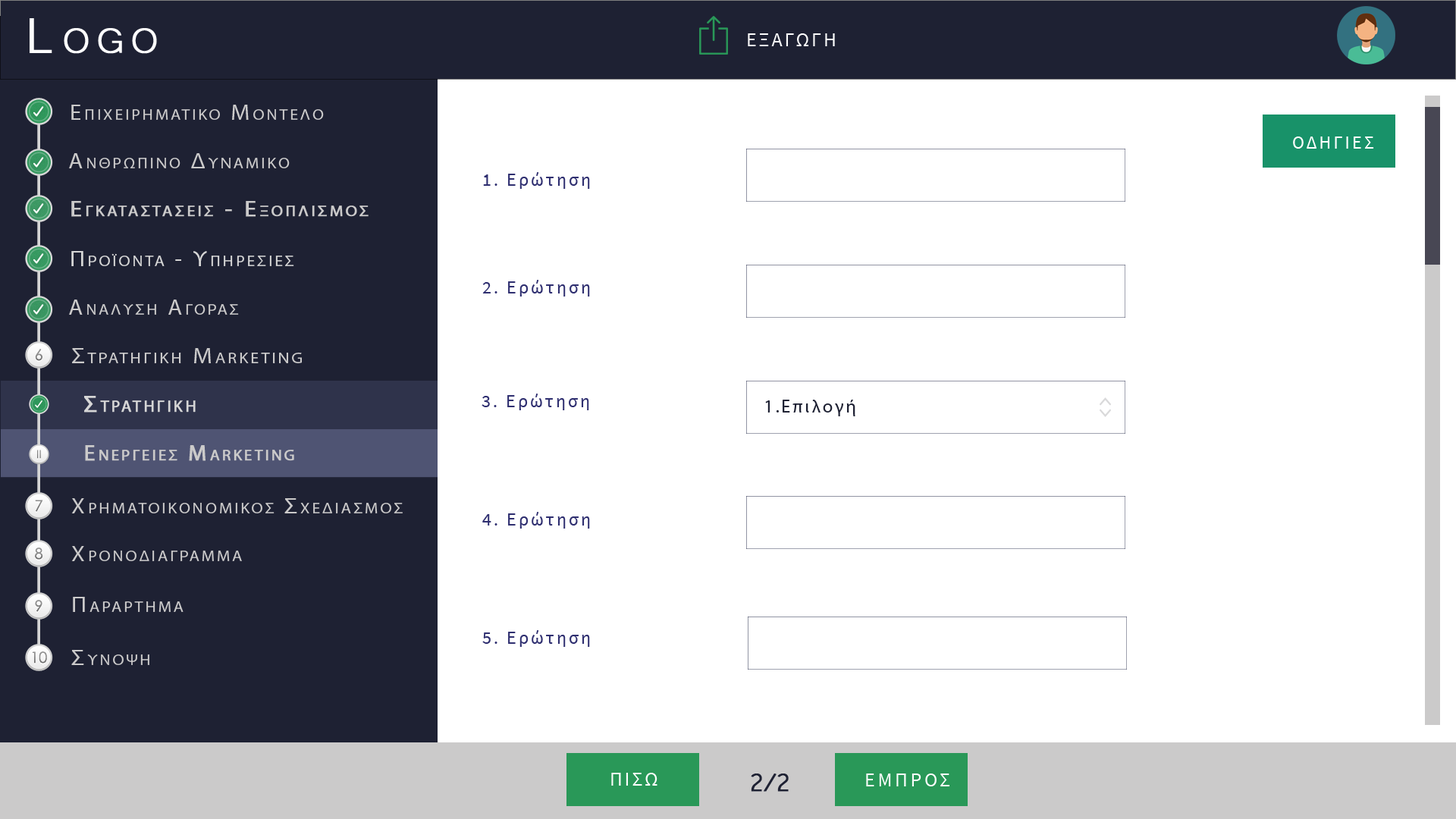
<style>
.page{position:relative;width:1456px;height:819px;background:#ffffff}
.page>*{position:absolute;margin:0}
.t1{font:63.7px "Microsoft-Yi-Baiti";letter-spacing:0.13em;color:#ffffff;font-variant:small-caps;font-weight:bold}
.t2{font:20px "SourceSansPro-Regular";letter-spacing:0.1em;color:#fefefe;text-transform:uppercase}
.t3{font:21.7px "MyriadPro-Regular";letter-spacing:0.13em;color:#cbcaca;font-variant:small-caps;scale:1.09 1}
.t4{font:23.4px "Microsoft-Yi-Baiti";letter-spacing:0.13em;color:#cbcaca;font-variant:small-caps;font-weight:bold}
.t5{font:18.2px "SourceSansPro-Regular";letter-spacing:0.13em;color:#ffffff;text-transform:uppercase}
.t6{font:18.2px "SourceSansPro-Regular";letter-spacing:0.13em;color:#2f2f70}
.t7{font:18.2px "SourceSansPro-Regular";letter-spacing:0.13em;color:#2f2f70;text-transform:uppercase}
.t8{font:21.7px/91px "MyriadPro-Regular";letter-spacing:0.13em;color:#cbcaca;font-variant:small-caps;font-weight:bold;scale:1.09 1}
.t9{font:23.4px/91px "Microsoft-Yi-Baiti";letter-spacing:0.13em;color:#cbcaca;font-variant:small-caps;font-weight:bold}
.t10{font:21.7px "MyriadPro-Regular";letter-spacing:0.13em;color:#d6d6d6;font-variant:small-caps;scale:1.09 1}
.t11{font:23.4px "Microsoft-Yi-Baiti";letter-spacing:0.13em;color:#d6d6d6;font-variant:small-caps;font-weight:bold}
.t12{font:15.3px "CenturyGothic";color:#838383}
.t13{font:22.2px "MyriadPro-Regular";letter-spacing:0.13em;color:#cbcaca;font-variant:small-caps;scale:1.09 1}
.t14{font:25.5px "Microsoft-Yi-Baiti";letter-spacing:0.13em;color:#cbcaca;font-variant:small-caps;font-weight:bold}
.t15{font:23.4px "MyriadPro-Regular";letter-spacing:0.13em;color:#d6d6d6;font-variant:small-caps;font-weight:bold}
.t16{font:18.2px "MyriadPro-Regular";letter-spacing:0.13em;color:#1e2133}
.t17{font:11.2px "CenturyGothic";color:#828282}
.t18{font:22.3px "MyriadPro-Regular";letter-spacing:0.13em;color:#cbcaca;font-variant:small-caps;font-weight:bold}
.t19{font:15.3px "CenturyGothic";color:#888888}
.t20{font:15.3px "CenturyGothic";color:#8b8b8b}
.t21{font:23.7px "Microsoft-Yi-Baiti";letter-spacing:0.13em;color:#cbcaca;font-variant:small-caps;scale:1.09 1}
.t22{font:15.3px "CenturyGothic";color:#878787}
.t23{font:32.8px "Microsoft-Yi-Baiti";letter-spacing:-0.1em;color:#1e2133;font-weight:bold}
.t24{font:20px "SourceSansPro-Regular";letter-spacing:0.13em;color:#fefefe;text-transform:uppercase}
</style>
<div class="page">
<p class="t1" style="left:30px;top:18px;width:127px;height:36px">Logo</p>
<p class="t2" style="left:748px;top:33px;width:87px;height:13px">εξαγωγη</p>
<p class="t3" style="left:71px;top:105px;width:253px;height:15px"><span class="t4">   </span>Επιχειρηματικο Μοντελο</p>
<p class="t5" style="left:1293px;top:136px;width:81px;height:13px">Οδηγιεσ</p>
<p class="t3" style="left:69px;top:153px;width:221px;height:15px"><span class="t4">   </span>Ανθρωπινο Δυναμικο</p>
<p class="t6" style="left:483px;top:172px;width:107px;height:17px"><span class="t7">1. </span>Ερώτηση</p>
<p class="t8" style="left:71px;top:201px;width:298px;height:16px"><span class="t9">   </span>Εγκαταστασεισ - Εξοπλισμοσ<br><br><span class="t9">Equipment</span></p>
<p class="t10" style="left:71px;top:251px;width:223px;height:15px"><span class="t11">   </span>Προϊοντα - Υπηρεσιεσ</p>
<p class="t6" style="left:482px;top:280px;width:108px;height:17px"><span class="t7">2. </span>Ερώτηση</p>
<p class="t3" style="left:69px;top:300px;width:170px;height:15px"><span class="t4">   </span>Αναλυση Αγορασ</p>
<p class="t12" style="left:35px;top:349px;width:7px;height:12px">6</p>
<p class="t13" style="left:72px;top:348px;width:230px;height:15px"><span class="t14">   </span>Στρατηγικη Marketing</p>
<p class="t15" style="left:84px;top:396px;width:112px;height:17px">Στρατηγικη</p>
<p class="t6" style="left:482px;top:394px;width:107px;height:16px"><span class="t7">3. </span>Ερώτηση</p>
<p class="t16" style="left:765px;top:400px;width:90px;height:16px">1.Επιλογή</p>
<p class="t17" style="left:37px;top:450px;width:4px;height:9px">II</p>
<p class="t18" style="left:85px;top:445px;width:209px;height:16px">Ενεργειεσ Marketing</p>
<p class="t19" style="left:35px;top:500px;width:8px;height:12px">7</p>
<p class="t3" style="left:71px;top:498px;width:332px;height:15px"><span class="t14">   </span>Χρηματοικονομικοσ Σχεδιασμοσ</p>
<p class="t6" style="left:482px;top:512px;width:108px;height:17px"><span class="t7">4. </span>Ερώτηση</p>
<p class="t3" style="left:71px;top:546px;width:171px;height:15px"><span class="t14">   </span>Χρονοδιαγραμμα</p>
<p class="t20" style="left:35px;top:548px;width:8px;height:12px">8</p>
<p class="t12" style="left:35px;top:600px;width:7px;height:12px">9</p>
<p class="t3" style="left:73px;top:597px;width:111px;height:15px"><span class="t21">   </span>Παραρτημα</p>
<p class="t6" style="left:482px;top:630px;width:108px;height:17px"><span class="t7">5. </span>Ερώτηση</p>
<p class="t22" style="left:32px;top:651px;width:15px;height:13px">10</p>
<p class="t3" style="left:71px;top:650px;width:78px;height:15px"><span class="t21">   </span>Συνοψη</p>
<p class="t2" style="left:611px;top:773px;width:46px;height:13px">Πισω</p>
<p class="t23" style="left:751px;top:773px;width:38px;height:19px">2/2</p>
<p class="t24" style="left:866px;top:773px;width:83px;height:13px">εμπροσ</p>
</div>
